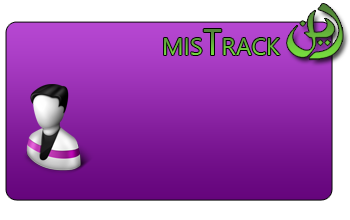
<style>
.page{position:relative;width:350px;height:220px;background:#ffffff}
.page>*{position:absolute;margin:0}
.t1{font:24px "SegoeUI"}
.t2{font:36px "SegoeUI"}
</style>
<div class="page">
<p class="t1" style="left:164px;top:29px;width:116px;height:26px">MIS<span class="t2">T</span>RACK</p>
</div>
